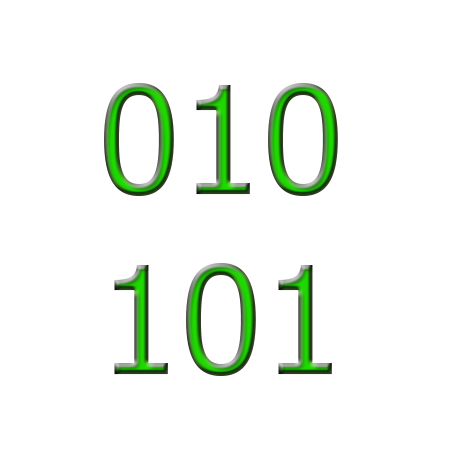
<style>
.page{position:relative;width:452px;height:456px;background:#ffffff}
.page>*{position:absolute;margin:0}
.t1{font:150px "Tahoma"}
</style>
<div class="page">
<p class="t1" style="left:104px;top:83px;width:234px;height:293px">010<br>1010</p>
</div>
